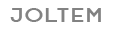
<style>
.page{position:relative;width:115px;height:30px;background:#ffffff}
.page>*{position:absolute;margin:0}
.t1{font:20.2px "Opificio-Bold";letter-spacing:0.1em;color:#838383;scale:1.12 1}
</style>
<div class="page">
<p class="t1" style="left:10px;top:8px;width:91px;height:14px">JOLTEM</p>
</div>
